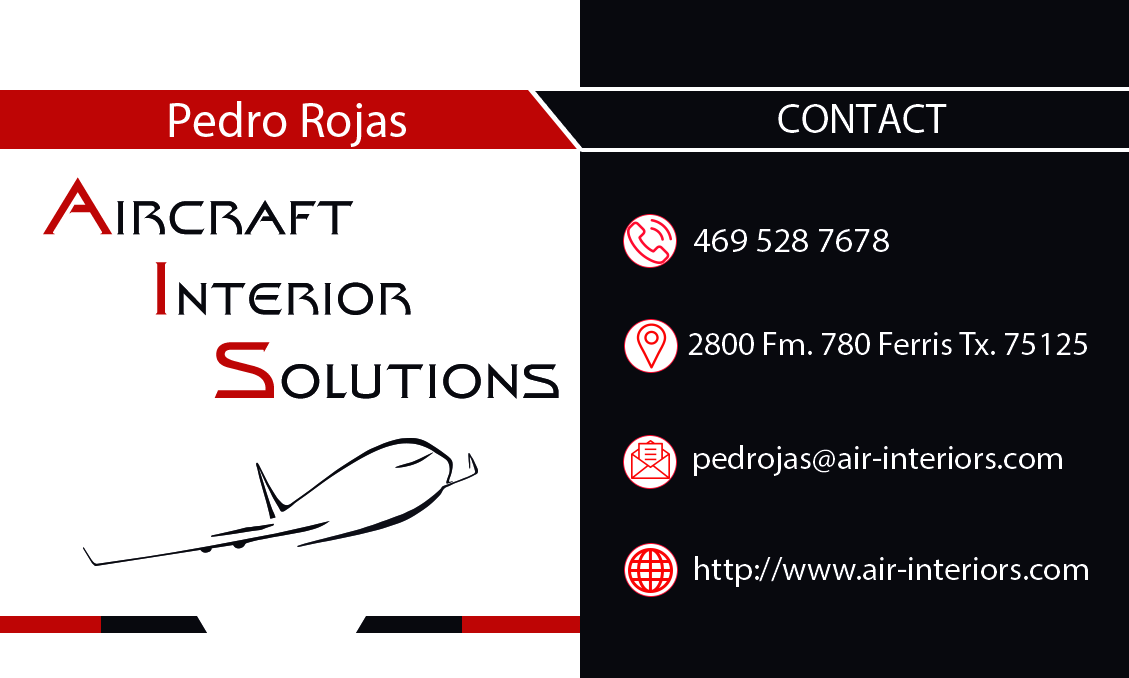
<style>
.page{position:relative;width:1129px;height:678px;background:#ffffff}
.page>*{position:absolute;margin:0}
.t1{font:50px "MyriadPro-Regular";color:#ffffff}
.t2{font:41.7px "MyriadPro-Regular";color:#ffffff}
.t3{font:47.6px "FinalFrontier";letter-spacing:0.04em;color:#08090e;text-transform:uppercase}
.t4{font:79.3px "FinalFrontier";letter-spacing:0.04em;color:#be0505;text-transform:uppercase}
.t5{font:35.4px "MyriadPro-Regular";color:#ffffff}
.t6{font:45.3px "FinalFrontier";letter-spacing:0.04em;color:#08090e;text-transform:uppercase}
.t7{font:75.5px "FinalFrontier";letter-spacing:0.04em;color:#be0505;text-transform:uppercase}
.t8{font:48.2px "FinalFrontier";letter-spacing:0.04em;color:#08090e;text-transform:uppercase}
.t9{font:80.3px "FinalFrontier";letter-spacing:0.04em;color:#be0505;text-transform:uppercase}
.t10{font:33.3px "MyriadPro-Regular";color:#ffffff}
</style>
<div class="page">
<p class="t1" style="left:169px;top:101px;width:237px;height:46px">Pedro Rojas</p>
<p class="t2" style="left:778px;top:104px;width:169px;height:29px">CONTACT</p>
<p class="t3" style="left:43px;top:177px;width:311px;height:58px"><span class="t4">A</span>ircraft</p>
<p class="t5" style="left:694px;top:229px;width:195px;height:23px">469 528 7678</p>
<p class="t6" style="left:155px;top:262px;width:256px;height:54px"><span class="t7">I</span>nterior</p>
<p class="t8" style="left:214px;top:342px;width:345px;height:57px"><span class="t9">S</span>olutions</p>
<p class="t10" style="left:688px;top:332px;width:399px;height:23px">2800 Fm. 780 Ferris Tx. 75125</p>
<p class="t10" style="left:694px;top:445px;width:368px;height:31px">pedrojas@air-interiors.com</p>
<p class="t10" style="left:695px;top:556px;width:393px;height:31px">http://www.air-interiors.com</p>
</div>
